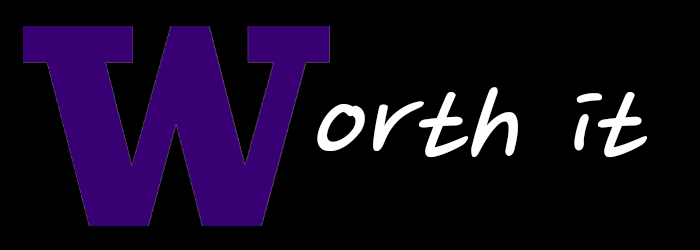
<style>
.page{position:relative;width:700px;height:250px;background:#000000}
.page>*{position:absolute;margin:0}
.t1{font:137.6px "NanumPen";color:#ffffff}
</style>
<div class="page">
<p class="t1" style="left:317px;top:87px;width:331px;height:71px">orth it</p>
</div>
